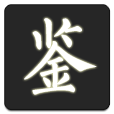
<style>
.page{position:relative;width:114px;height:114px;background:#262626}
.page>*{position:absolute;margin:0}
.t1{font:92px "Untitled";color:#ffffff}
</style>
<div class="page">
<p class="t1" style="left:24px;top:18px;width:73px;height:77px">鉴</p>
</div>
